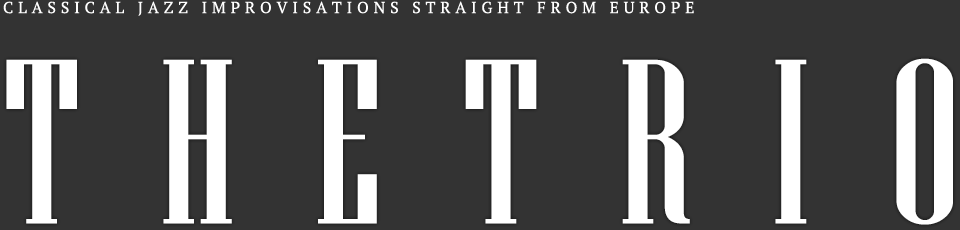
<style>
.page{position:relative;width:960px;height:230px;background:#333333}
.page>*{position:absolute;margin:0}
.t1{font:16px "PTSerif-Regular";letter-spacing:0.3em;color:#ffffff;text-transform:uppercase}
.t2{font:233.3px "NiagaraSolid-Reg";letter-spacing:0.34em;color:#ffffff;text-transform:uppercase}
</style>
<div class="page">
<p class="t1" style="left:3px;top:1px;width:691px;height:15px">Classical jazz improvisations straight from europe</p>
<p class="t2" style="left:6px;top:58px;width:947px;height:167px">TheTrio</p>
</div>
